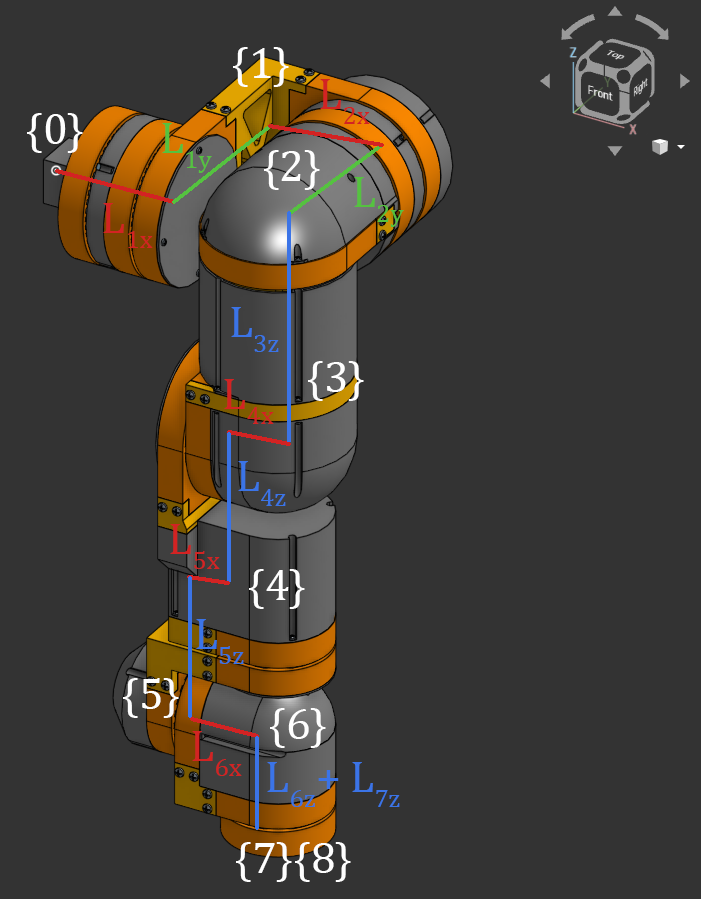
<style>
.page{position:relative;width:701px;height:899px;background:#333333}
.page>*{position:absolute;margin:0}
.t1{font:44.7px "Cambria";color:#fefefe}
.t2{font:44.7px "Cambria";color:#d32323}
.t3{font:44.7px "Cambria";color:#55c240}
.t4{font:44.7px "Cambria";color:#3b74e7}
</style>
<div class="page">
<p class="t1" style="left:233px;top:47px;width:56px;height:40px">{1}</p>
<p class="t2" style="left:320px;top:79px;width:50px;height:45px">L2x</p>
<p class="t1" style="left:27px;top:113px;width:56px;height:40px">{0}</p>
<p class="t3" style="left:162px;top:123px;width:50px;height:50px">L1y</p>
<p class="t1" style="left:264px;top:150px;width:56px;height:40px">{2}</p>
<p class="t3" style="left:354px;top:177px;width:50px;height:50px">L2y</p>
<p class="t2" style="left:103px;top:203px;width:50px;height:45px">L1x</p>
<p class="t4" style="left:231px;top:307px;width:48px;height:45px">L3z</p>
<p class="t1" style="left:308px;top:361px;width:56px;height:40px">{3}</p>
<p class="t2" style="left:224px;top:379px;width:50px;height:45px">L4x</p>
<p class="t4" style="left:238px;top:461px;width:48px;height:45px">L4z</p>
<p class="t2" style="left:170px;top:524px;width:50px;height:45px">L5x</p>
<p class="t1" style="left:249px;top:569px;width:56px;height:40px">{4}</p>
<p class="t4" style="left:196px;top:619px;width:48px;height:45px">L5z</p>
<p class="t1" style="left:123px;top:678px;width:56px;height:40px">{5}</p>
<p class="t1" style="left:270px;top:708px;width:56px;height:40px">{6}</p>
<p class="t2" style="left:192px;top:731px;width:50px;height:45px">L6x</p>
<p class="t4" style="left:267px;top:762px;width:133px;height:45px">L6z+ L7z</p>
<p class="t1" style="left:236px;top:842px;width:56px;height:40px">{7}</p>
<p class="t1" style="left:295px;top:842px;width:56px;height:40px">{8}</p>
</div>
